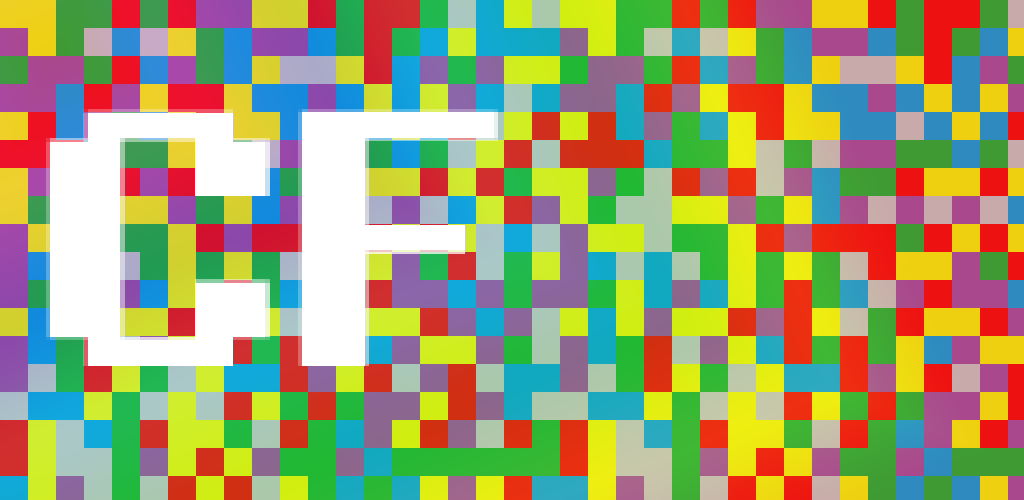
<style>
.page{position:relative;width:1024px;height:500px}
.page>*{position:absolute;margin:0}
.t1{font:361.3px "Fixedsys";color:#ffffff;scale:1.29 1}
.t2{font:362.6px "Fixedsys";color:#ffffff;scale:1.15 1}
</style>
<div class="page">
<p class="t1" style="left:46px;top:109px;width:224px;height:257px">C</p>
<p class="t2" style="left:298px;top:109px;width:200px;height:257px">F</p>
</div>
